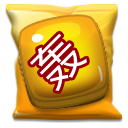
<style>
.page{position:relative;width:128px;height:128px;background:#ffffff}
.page>*{position:absolute;margin:0}
.t1{font:48px "SourceHanSansCN-Regular";color:#ffffff}
</style>
<div class="page">
<p class="t1" style="left:30px;top:33px;width:57px;height:58px;rotate:-45deg">轰</p>
</div>
